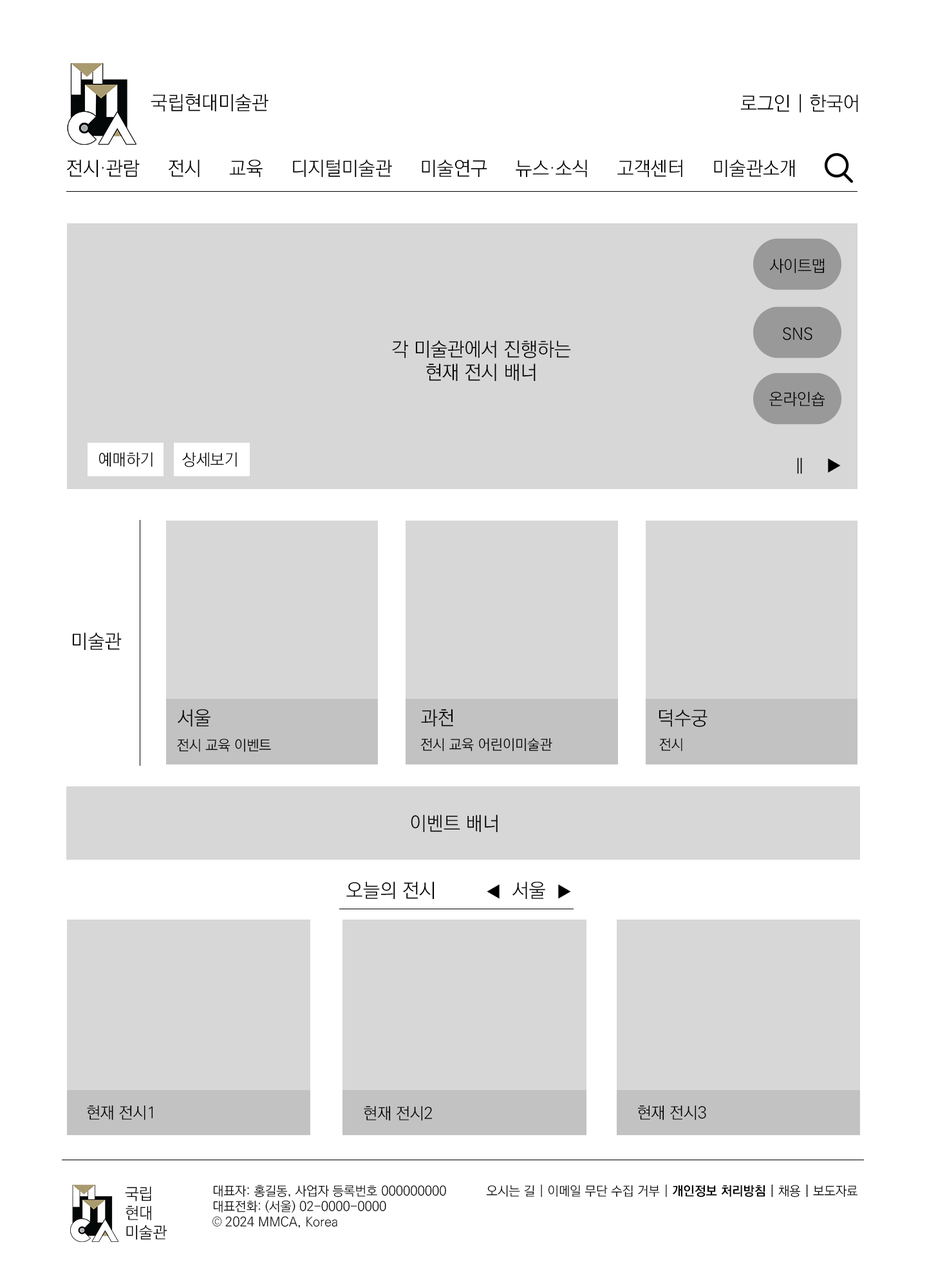
<style>
.page{position:relative;width:927px;height:1287px;background:#ffffff}
.page>*{position:absolute;margin:0}
.t1{font:19.3px "KoPubWorldDotumLight";color:#000000}
.t2{font:16.1px "KoPubWorldDotumLight";color:#000000}
.t3{font:16.1px "KoPubWorldDotumLight";color:#000000;font-weight:bold}
.t4{font:14.2px "KoPubWorldDotumLight";color:#000000}
.t5{font:12.9px "KoPubWorldDotumLight";color:#000000}
.t6{font:12.9px "KoPubWorldDotumBold";color:#000000}
</style>
<div class="page">
<p class="t1" style="left:151px;top:94px;width:117px;height:18px">국립현대미술관</p>
<p class="t1" style="left:740px;top:94px;width:118px;height:19px">로그인 | 한국어</p>
<p class="t1" style="left:66px;top:160px;width:729px;height:18px">전시·관람     전시     교육     디지털미술관     미술연구     뉴스·소식     고객센터     미술관소개</p>
<p class="t2" style="left:769px;top:258px;width:55px;height:15px">사이트맵</p>
<p class="t2" style="left:782px;top:327px;width:30px;height:13px">SNS</p>
<p class="t1" style="left:392px;top:340px;width:179px;height:42px;text-align:center">각 미술관에서 진행하는<br>현재 전시 배너</p>
<p class="t2" style="left:769px;top:391px;width:56px;height:16px">온라인숍</p>
<p class="t2" style="left:98px;top:452px;width:139px;height:15px">예매하기      상세보기</p>
<p class="t3" style="left:797px;top:457px;width:43px;height:17px">∥  <span class="t2">  ▶</span></p>
<p class="t1" style="left:72px;top:633px;width:50px;height:18px">미술관</p>
<p class="t1" style="left:177px;top:709px;width:33px;height:18px">서울</p>
<p class="t1" style="left:421px;top:709px;width:32px;height:18px">과천</p>
<p class="t1" style="left:658px;top:709px;width:49px;height:18px">덕수궁</p>
<p class="t4" style="left:177px;top:739px;width:94px;height:13px">전시 교육 이벤트</p>
<p class="t4" style="left:420px;top:738px;width:132px;height:14px">전시 교육 어린이미술관</p>
<p class="t4" style="left:659px;top:738px;width:23px;height:14px">전시</p>
<p class="t1" style="left:411px;top:815px;width:86px;height:18px">이벤트 배너</p>
<p class="t1" style="left:346px;top:882px;width:225px;height:18px">오늘의 전시         <span class="t2">◀</span>  서울  <span class="t2">▶</span></p>
<p class="t2" style="left:87px;top:1105px;width:66px;height:15px">현재 전시1</p>
<p class="t2" style="left:364px;top:1105px;width:68px;height:16px">현재 전시2</p>
<p class="t2" style="left:638px;top:1105px;width:68px;height:15px">현재 전시3</p>
<p class="t2" style="left:125px;top:1186px;width:42px;height:54px">국립<br>현대<br>미술관</p>
<p class="t5" style="left:212px;top:1185px;width:234px;height:43px">대표자: 홍길동, 사업자 등록번호 000000000<br>대표전화: (서울) 02-0000-0000<br>© 2024 MMCA, Korea</p>
<p class="t5" style="left:486px;top:1184px;width:372px;height:13px">오시는 길 | 이메일 무단 수집 거부 | <span class="t6">개인정보 처리방침</span> | 채용 | 보도자료</p>
</div>
